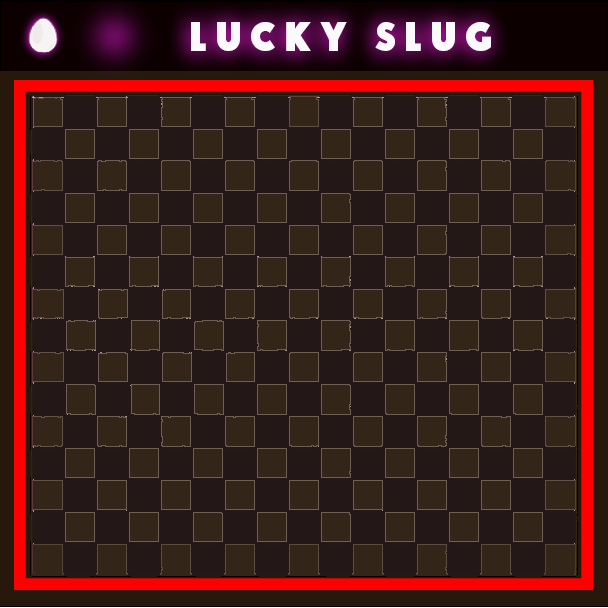
<style>
.page{position:relative;width:608px;height:608px;background:#241717}
.page>*{position:absolute;margin:0}
.t1{font:40px "Zamenhof-Plain";letter-spacing:0.2em;color:#fbf9fb}
</style>
<div class="page">
<p class="t1" style="left:191px;top:22px;width:300px;height:29px">Lucky slug</p>
</div>
